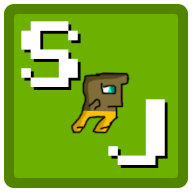
<style>
.page{position:relative;width:192px;height:192px;background:#6cb100}
.page>*{position:absolute;margin:0}
.t1{font:150px "8-Bit-Madness";color:#ffffff}
.t2{font:150px "8-Bit-Madness"}
</style>
<div class="page">
<p class="t1" style="left:21px;top:21px;width:57px;height:66px">S</p>
<p class="t2" style="left:24px;top:24px;width:57px;height:66px">S</p>
<p class="t1" style="left:108px;top:99px;width:57px;height:66px">J</p>
<p class="t1" style="left:111px;top:102px;width:57px;height:66px">J</p>
</div>
